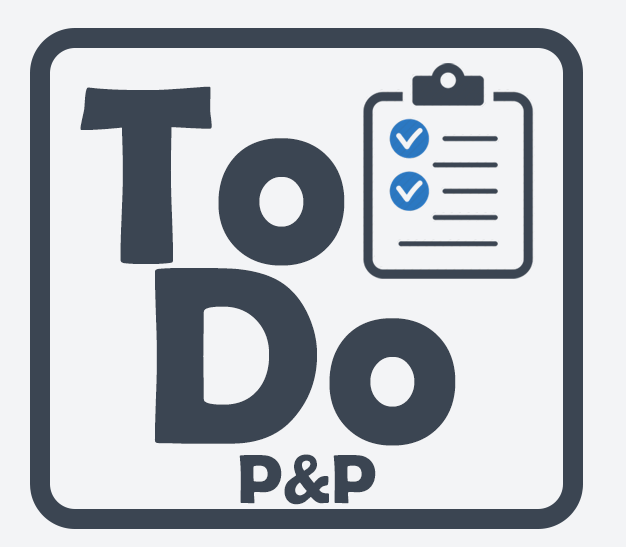
<style>
.page{position:relative;width:626px;height:547px;background:#f3f4f6}
.page>*{position:absolute;margin:0}
.t1{font:255px/180px "BerlinSansFBDemi-Bold";color:#3b4552}
.t2{font:70px "BerlinSansFBDemi-Bold";color:#3b4552}
</style>
<div class="page">
<p class="t1" style="left:80px;top:86px;width:376px;height:360px">To<br> Do</p>
<p class="t2" style="left:239px;top:454px;width:137px;height:51px">P&amp;P</p>
</div>
